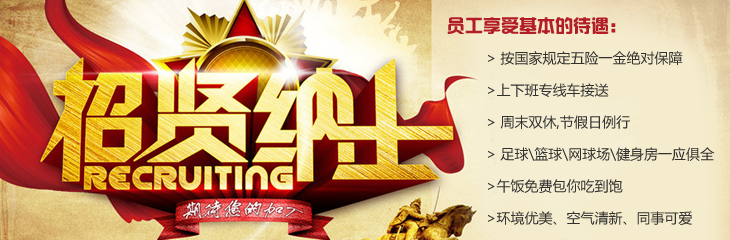
<style>
.page{position:relative;width:730px;height:240px}
.page>*{position:absolute;margin:0}
.t1{font:18px "hzgb";color:#b31d26}
.t2{font:14px/16px "MicrosoftYaHei";color:#323130}
</style>
<div class="page">
<p class="t1" style="left:447px;top:17px;width:169px;height:17px">员工享受基本的待遇：</p>
<p class="t2" style="left:488px;top:51px;width:227px;height:174px">&gt; 按国家规定五险一金绝对保障<br><br>&gt;上下班专线车接送<br><br>&gt; 周末双休,节假日例行<br><br>&gt; 足球\篮球\网球场\健身房一应俱全<br><br>&gt;午饭免费包你吃到饱<br><br>&gt;环境优美、空气清新、同事可爱</p>
</div>
